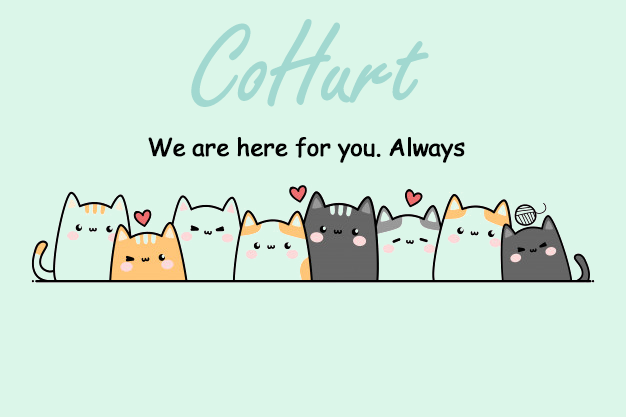
<style>
.page{position:relative;width:626px;height:417px;background:#dbf6e9}
.page>*{position:absolute;margin:0}
.t1{font:120.5px "FreestyleScript-Regular";letter-spacing:-0.03em;color:#a1d8d0;font-weight:bold}
.t2{font:24px "ComicSansMS";letter-spacing:-0.03em;color:#010101;font-weight:bold}
</style>
<div class="page">
<p class="t1" style="left:191px;top:19px;width:238px;height:88px">CoHurt</p>
<p class="t2" style="left:148px;top:137px;width:317px;height:26px">We are here for you. Always</p>
</div>
